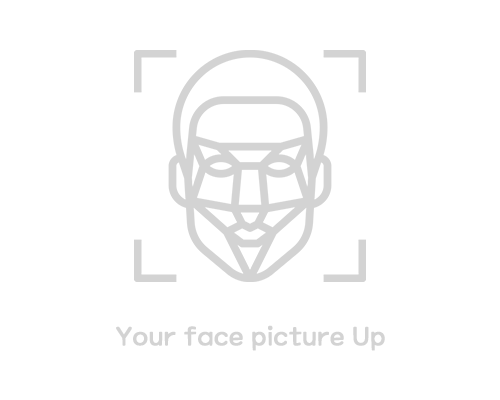
<style>
.page{position:relative;width:500px;height:400px;background:#ffffff}
.page>*{position:absolute;margin:0}
.t1{font:25px "MaplestoryLight";color:#d3d3d3;font-weight:bold}
</style>
<div class="page">
<p class="t1" style="left:116px;top:325px;width:269px;height:26px">Your face picture Up</p>
</div>
